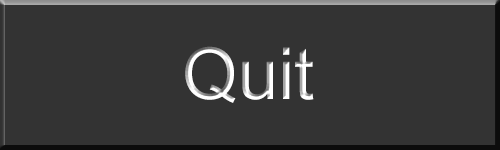
<style>
.page{position:relative;width:500px;height:150px;background:#333333}
.page>*{position:absolute;margin:0}
.t1{font:72px "ArialMT";color:#ffffff}
</style>
<div class="page">
<p class="t1" style="left:185px;top:46px;width:129px;height:57px">Quit</p>
</div>
